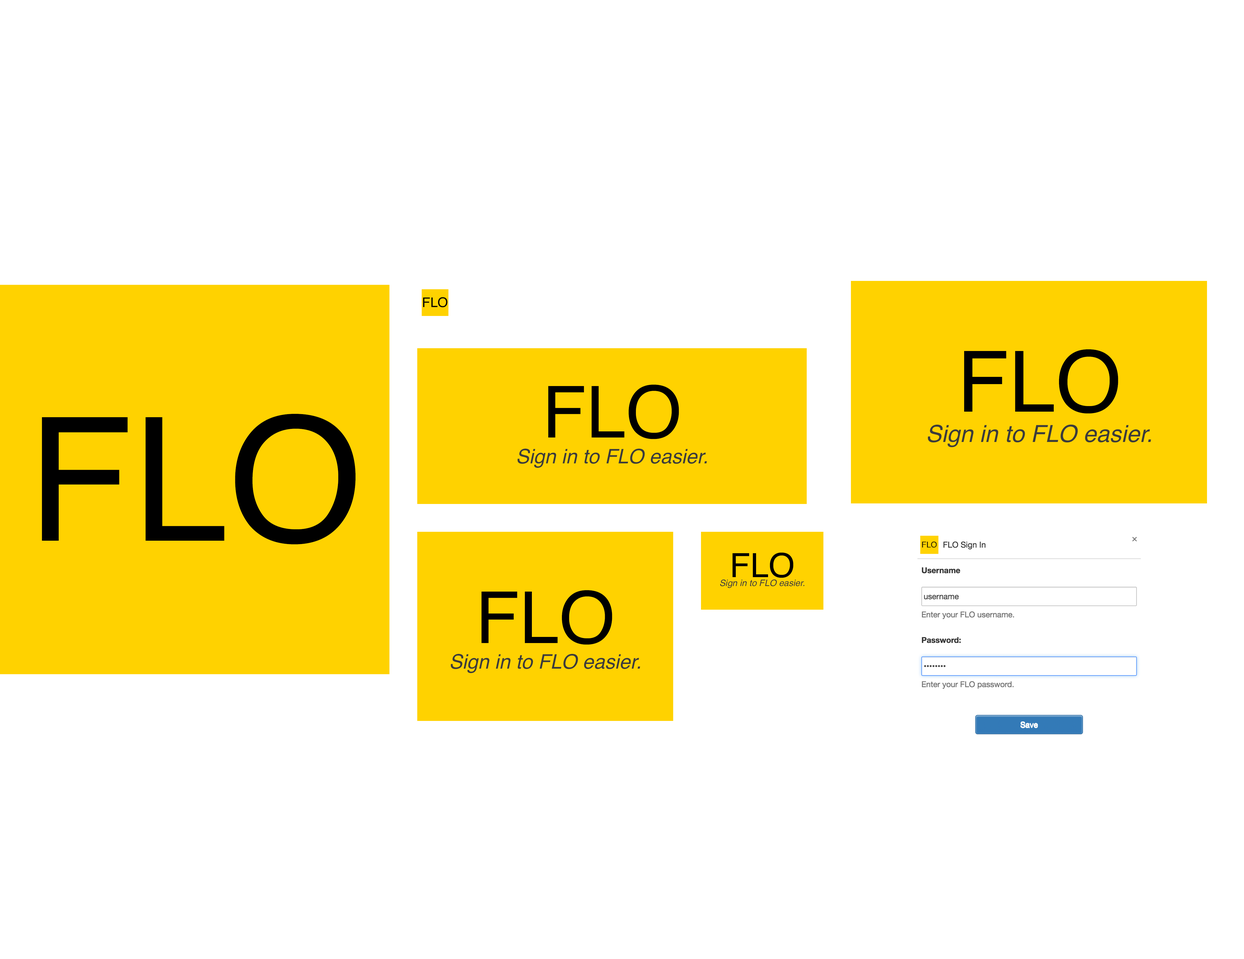
<style>
.page{position:relative;width:1244px;height:959px;background:#ffffff}
.page>*{position:absolute;margin:0}
.t1{font:13.3px "Helvetica";color:#000000}
.t2{font:84.5px "Helvetica";color:#000000}
.t3{font:71.7px "Helvetica";color:#000000}
.t4{font:172.1px "Helvetica";color:#000000}
.t5{font:23.6px "Helvetica-Oblique";color:#3b3b3b}
.t6{font:20px "Helvetica-Oblique";color:#3b3b3b}
.t7{font:33.4px "Helvetica";color:#000000}
.t8{font:8.9px "Helvetica-Oblique";color:#3b3b3b}
</style>
<div class="page">
<p class="t1" style="left:423px;top:297px;width:24px;height:10px">FLO</p>
<p class="t2" style="left:964px;top:349px;width:154px;height:65px">FLO</p>
<p class="t3" style="left:548px;top:385px;width:131px;height:54px">FLO</p>
<p class="t4" style="left:42px;top:414px;width:314px;height:130px">FLO</p>
<p class="t5" style="left:927px;top:424px;width:224px;height:23px">Sign in to FLO easier.</p>
<p class="t6" style="left:517px;top:449px;width:190px;height:19px">Sign in to FLO easier.</p>
<p class="t7" style="left:732px;top:552px;width:61px;height:26px">FLO</p>
<p class="t8" style="left:720px;top:579px;width:84px;height:9px">Sign in to FLO easier.</p>
<p class="t3" style="left:481px;top:590px;width:131px;height:55px">FLO</p>
<p class="t6" style="left:451px;top:654px;width:189px;height:19px">Sign in to FLO easier.</p>
</div>
